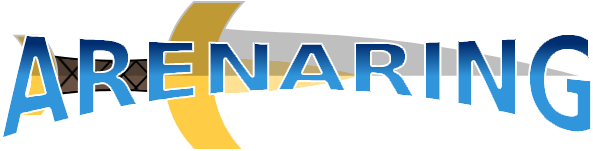
<style>
.page{position:relative;width:593px;height:151px;background:#ffffff}
.page>*{position:absolute;margin:0}
.t1{font:147.4px "AgencyFB-Bold";letter-spacing:-0.02em;scale:0.63 1}
</style>
<div class="page">
<p class="t1" style="left:0px;top:33px;width:593px;height:107px">ARENARING</p>
</div>
